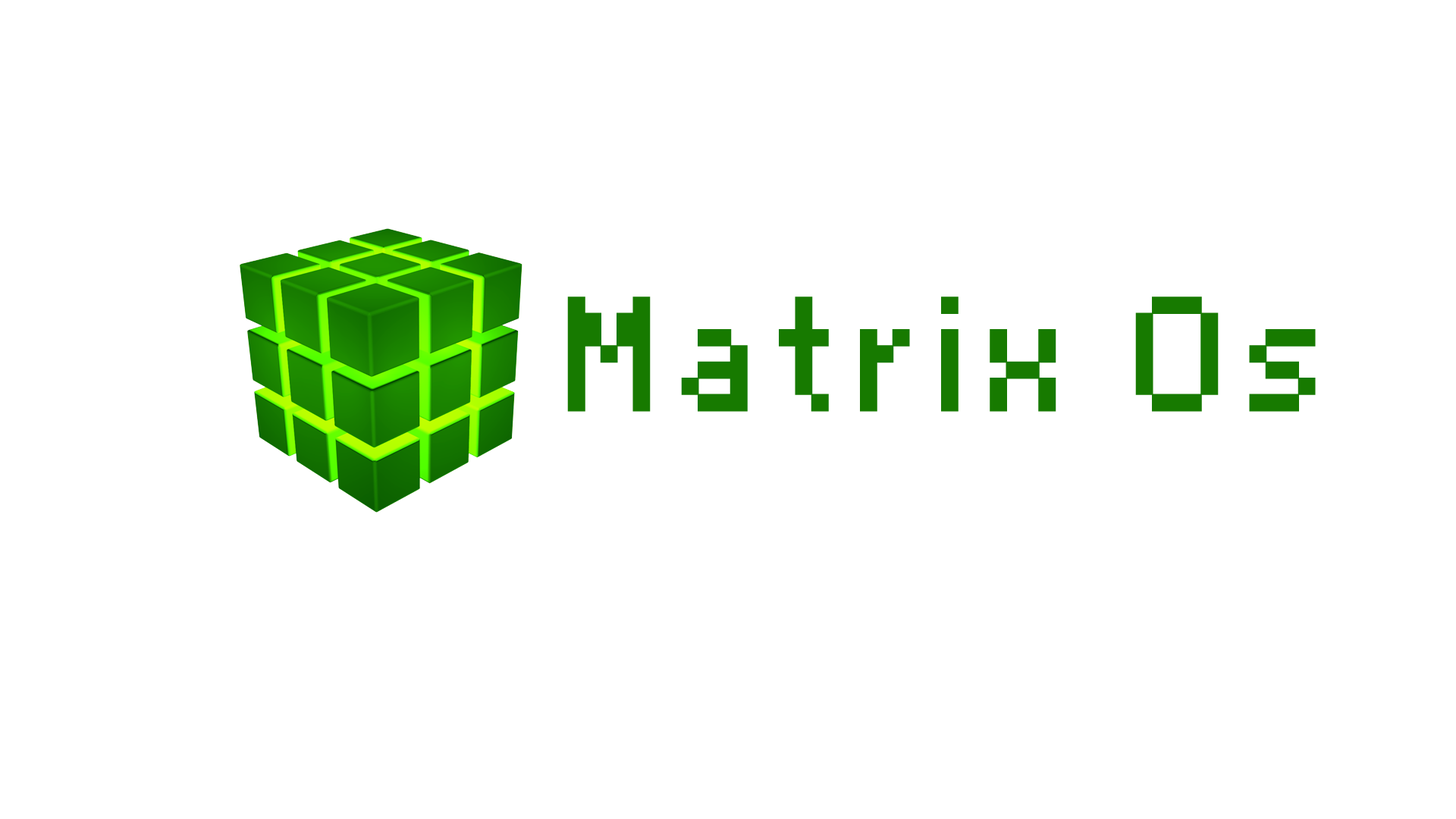
<style>
.page{position:relative;width:1456px;height:819px;background:#ffffff}
.page>*{position:absolute;margin:0}
.t1{font:129.6px "FFFAquarius";color:#177a00}
</style>
<div class="page">
<p class="t1" style="left:567px;top:297px;width:749px;height:115px">Matrix 0s</p>
</div>
